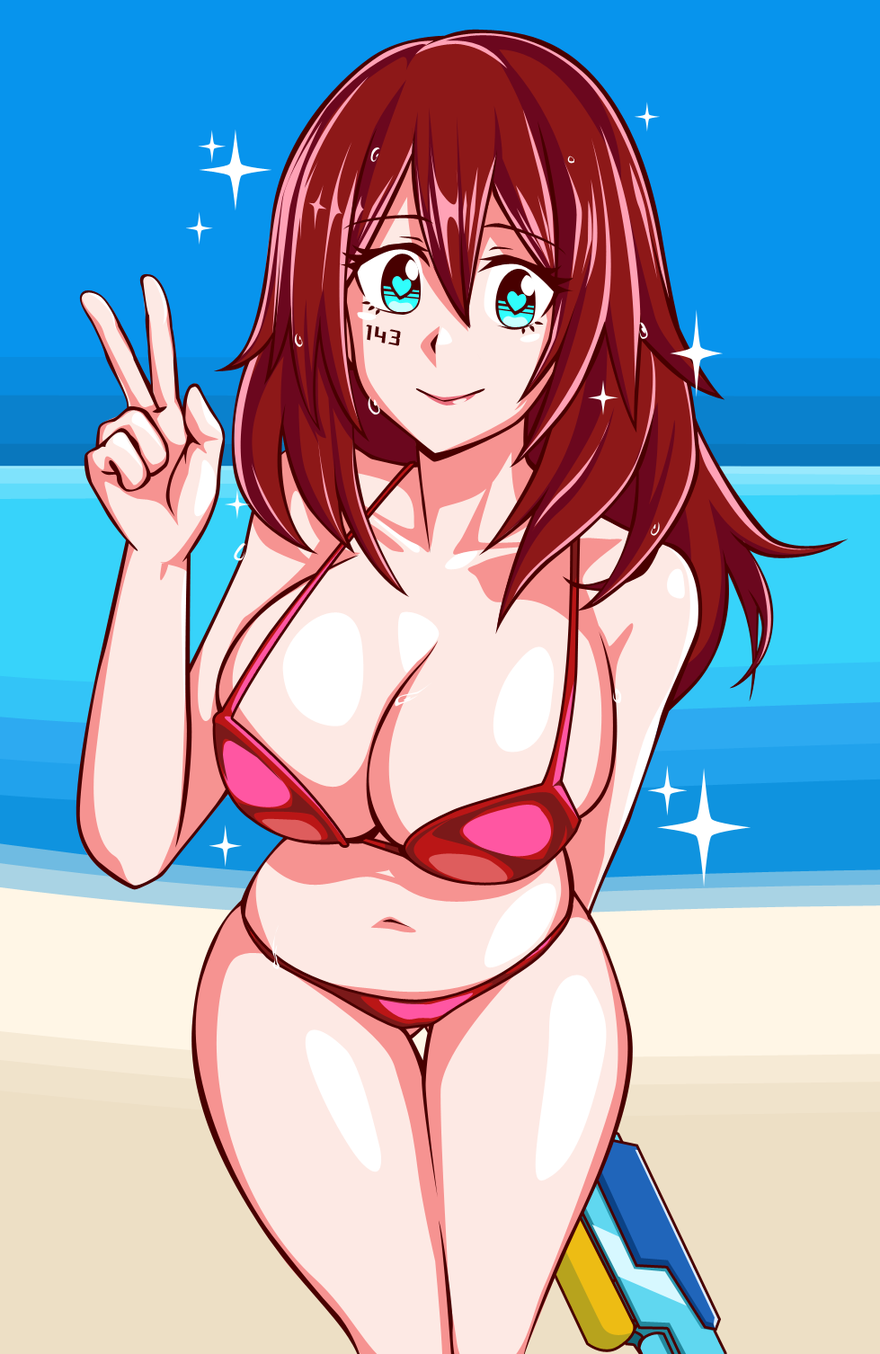
<style>
.page{position:relative;width:880px;height:1354px}
.page>*{position:absolute;margin:0}
.t1{font:22.2px "SFElectrotome";letter-spacing:0.025em;color:#480000;scale:1.19 1}
</style>
<div class="page">
<p class="t1" style="left:366px;top:325px;width:35px;height:21px;rotate:12deg">143</p>
</div>
